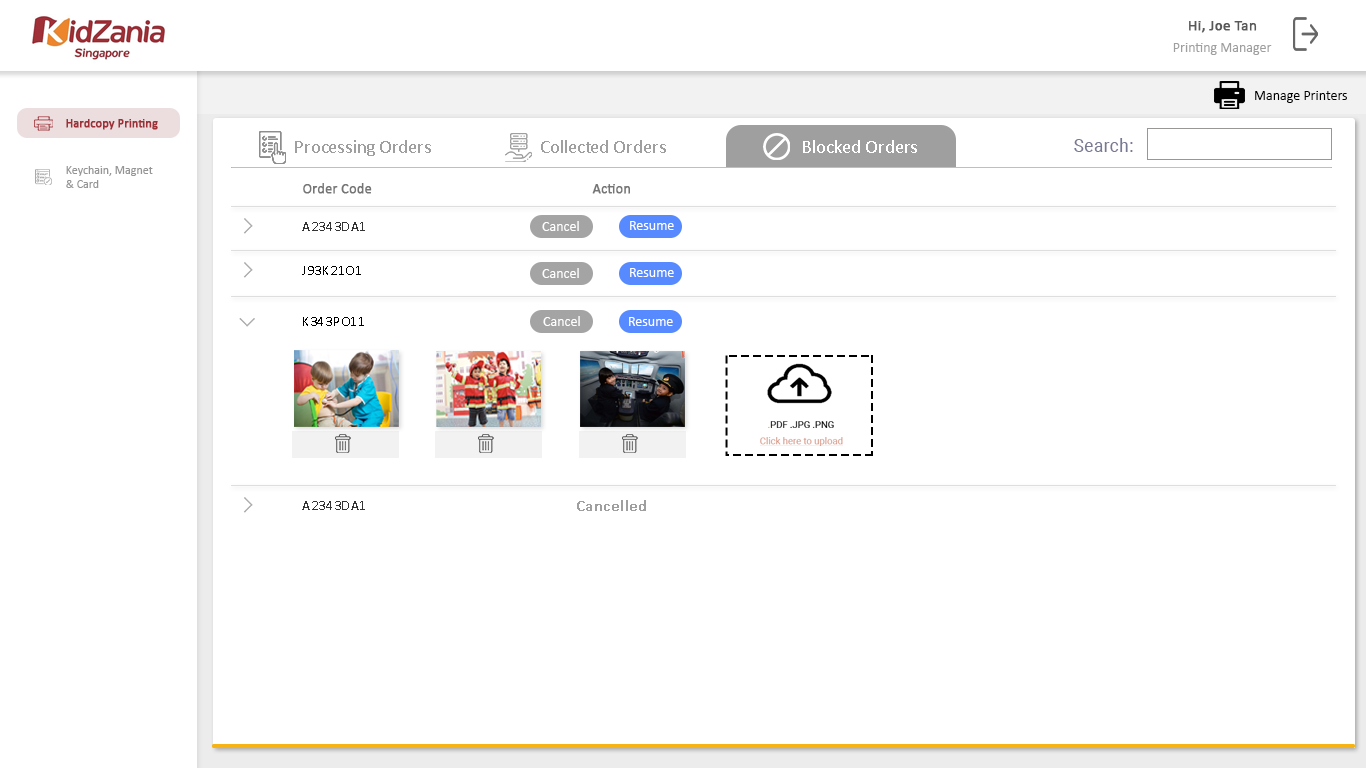
<style>
.page{position:relative;width:1366px;height:768px;background:#ffffff}
.page>*{position:absolute;margin:0}
.t1{font:15px "Calibri";color:#585858;font-weight:bold}
.t2{font:14px "Calibri";color:#9f9f9f}
.t3{font:14px "Calibri";color:#000000}
.t4{font:12px "Calibri";color:#9f3037;font-weight:bold}
.t5{font:19px "Calibri";letter-spacing:-0.01em;color:#9f9f9f}
.t6{font:19px "Calibri";color:#9f9f9f}
.t7{font:19px "Calibri";color:#ffffff}
.t8{font:17.5px "Roboto-Regular";letter-spacing:0.017em;color:#787993}
.t9{font:12px/14px "Calibri";color:#959595}
.t10{font:14px "Calibri";color:#757575;font-weight:bold}
.t11{font:13.9px "Calibri";letter-spacing:0.05em;color:#343434}
.t12{font:14px "Calibri";color:#ffffff}
.t13{font:14px "Calibri";letter-spacing:0.05em;color:#000000}
.t14{font:9.5px "Roboto-Regular";color:#010101}
.t15{font:9.5px "Roboto-Regular";color:#f28b00}
.t16{font:9.5px "Roboto-Regular";color:#d59685;text-decoration:underline}
.t17{font:16px "Calibri-Light";letter-spacing:-0.01em;color:#9f9f9f;font-weight:bold}
</style>
<div class="page">
<p class="t1" style="left:1189px;top:21px;width:68px;height:12px">Hi, Joe Tan</p>
<p class="t2" style="left:1173px;top:43px;width:99px;height:12px">Printing Manager</p>
<p class="t3" style="left:1255px;top:91px;width:92px;height:12px">Manage Printers</p>
<p class="t4" style="left:66px;top:119px;width:92px;height:11px">Hardcopy Printing</p>
<p class="t5" style="left:295px;top:140px;width:136px;height:16px">Processing Orders</p>
<p class="t6" style="left:541px;top:140px;width:125px;height:13px">Collected Orders</p>
<p class="t7" style="left:803px;top:140px;width:114px;height:13px">Blocked Orders</p>
<p class="t8" style="left:1074px;top:138px;width:59px;height:14px">Search:</p>
<p class="t9" style="left:66px;top:166px;width:87px;height:22px">Keychain, Magnet <br>&amp; Card</p>
<p class="t10" style="left:303px;top:183px;width:69px;height:11px">Order Code</p>
<p class="t10" style="left:592px;top:184px;width:38px;height:10px">Action</p>
<p class="t11" style="left:302px;top:222px;width:63px;height:9px">A2343DA1</p>
<p class="t12" style="left:542px;top:221px;width:37px;height:10px">Cancel</p>
<p class="t12" style="left:630px;top:221px;width:44px;height:9px">Resume</p>
<p class="t13" style="left:302px;top:266px;width:59px;height:9px">J93K21O1</p>
<p class="t12" style="left:542px;top:268px;width:37px;height:10px">Cancel</p>
<p class="t12" style="left:630px;top:268px;width:44px;height:9px">Resume</p>
<p class="t13" style="left:303px;top:317px;width:61px;height:9px">K343PO11</p>
<p class="t12" style="left:543px;top:316px;width:37px;height:10px">Cancel</p>
<p class="t12" style="left:629px;top:317px;width:44px;height:9px">Resume</p>
<p class="t14" style="left:768px;top:421px;width:66px;height:7px"><span class="t15">.</span>PDF .JPG .PNG</p>
<p class="t16" style="left:760px;top:437px;width:83px;height:9px">Click here to upload</p>
<p class="t11" style="left:302px;top:501px;width:63px;height:9px">A2343DA1</p>
<p class="t17" style="left:577px;top:500px;width:69px;height:11px">Cancelled</p>
</div>
